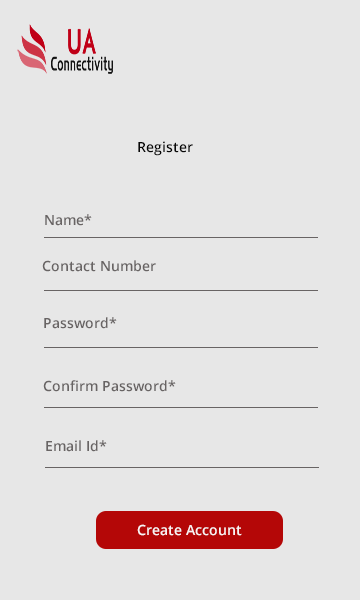
<style>
.page{position:relative;width:360px;height:600px;background:#e7e7e7}
.page>*{position:absolute;margin:0}
.t1{font:14px "OpenSans-Semibold";color:#070707}
.t2{font:14px "OpenSans-Semibold";color:#686464}
.t3{font:14px "OpenSans-Semibold";color:#faf4f4}
</style>
<div class="page">
<p class="t1" style="left:138px;top:141px;width:55px;height:15px">Register</p>
<p class="t2" style="left:45px;top:214px;width:47px;height:12px">Name*</p>
<p class="t2" style="left:42px;top:260px;width:114px;height:12px">Contact Number</p>
<p class="t2" style="left:44px;top:317px;width:73px;height:12px">Password*</p>
<p class="t2" style="left:43px;top:380px;width:133px;height:12px">Confirm Password*</p>
<p class="t2" style="left:46px;top:440px;width:61px;height:12px">Email Id*</p>
<p class="t3" style="left:137px;top:524px;width:105px;height:12px">Create Account</p>
</div>
